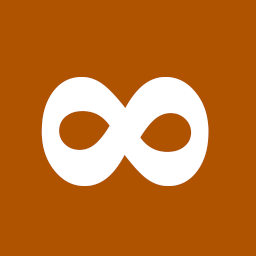
<style>
.page{position:relative;width:256px;height:256px;background:#b05300}
.page>*{position:absolute;margin:0}
.t1{font:254.5px "FuturaBT-ExtraBlack";letter-spacing:0.025em;color:#ffffff}
</style>
<div class="page">
<p class="t1" style="left:41px;top:77px;width:168px;height:109px">∞</p>
</div>
